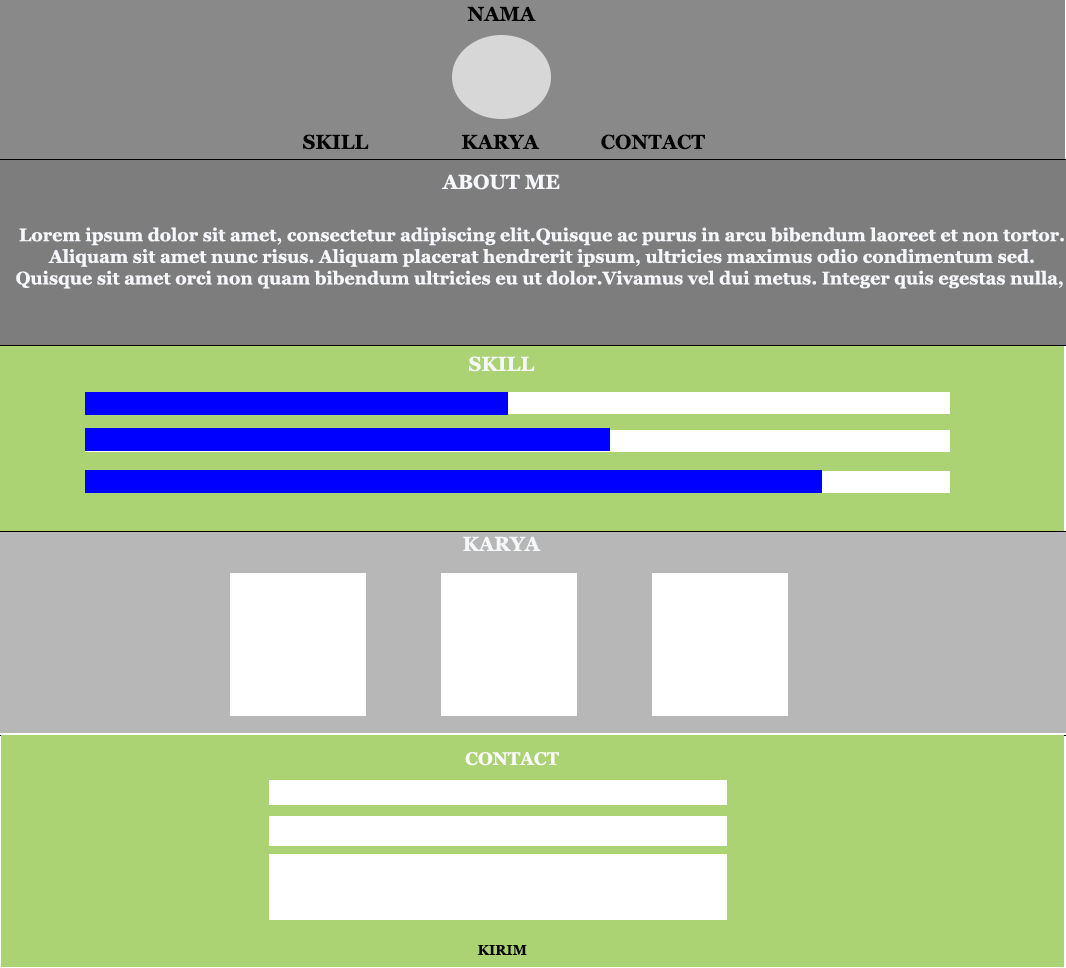
<style>
.page{position:relative;width:1066px;height:968px;background:#acd373}
.page>*{position:absolute;margin:0}
.t1{font:20px "Georgia-Bold";color:#040404}
.t2{font:20px "Georgia-Bold";color:#f6f7fb}
.t3{font:18px "Georgia-Bold";color:#f6f7fb}
.t4{font:18px "Georgia-Bold";color:#fafafb}
.t5{font:14px "Georgia-Bold";color:#040404}
</style>
<div class="page">
<p class="t1" style="left:467px;top:6px;width:69px;height:15px">NAMA</p>
<p class="t1" style="left:303px;top:134px;width:402px;height:16px">SKILL             KARYA      CONTACT</p>
<p class="t2" style="left:442px;top:174px;width:118px;height:16px">ABOUT ME</p>
<p class="t3" style="left:16px;top:227px;width:1048px;height:62px;text-align:center">Lorem ipsum dolor sit amet, consectetur adipiscing elit.Quisque ac purus in arcu bibendum laoreet et non tortor.<br>Aliquam sit amet nunc risus. Aliquam placerat hendrerit ipsum, ultricies maximus odio condimentum sed.<br>Quisque sit amet orci non quam bibendum ultricies eu ut dolor.Vivamus vel dui metus. Integer quis egestas nulla,</p>
<p class="t2" style="left:469px;top:356px;width:66px;height:16px">SKILL</p>
<p class="t2" style="left:463px;top:536px;width:78px;height:15px">KARYA</p>
<p class="t4" style="left:465px;top:752px;width:94px;height:14px">CONTACT</p>
<p class="t5" style="left:477px;top:945px;width:50px;height:10px">KIRIM</p>
</div>
